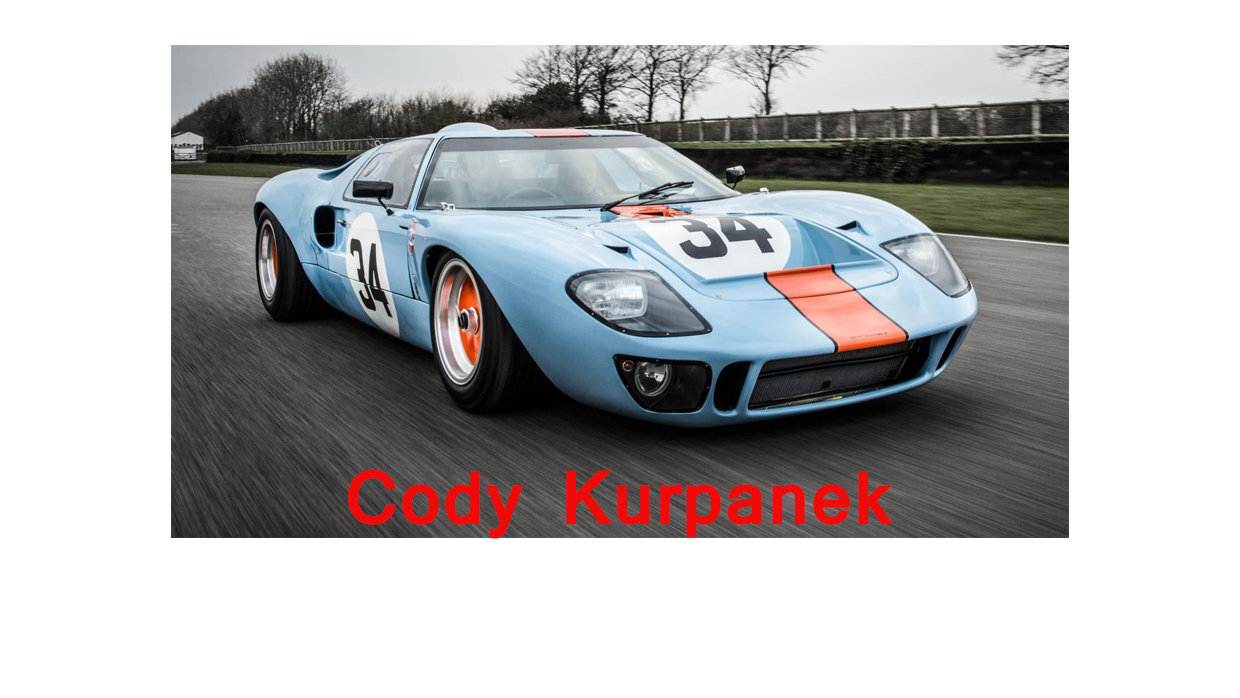
<style>
.page{position:relative;width:1240px;height:698px;background:#ffffff}
.page>*{position:absolute;margin:0}
.t1{font:72px "Mangal-Bold";color:#f00b0b}
</style>
<div class="page">
<p class="t1" style="left:348px;top:469px;width:545px;height:70px">Cody Kurpanek</p>
</div>
